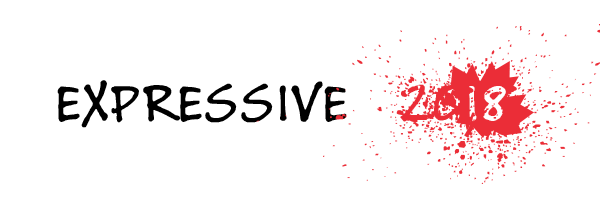
<style>
.page{position:relative;width:600px;height:200px;background:#ffffff}
.page>*{position:absolute;margin:0}
.t1{font:58.2px "BuxtonSketch";letter-spacing:0.05em;color:#000000}
.t2{font:58.2px "BuxtonSketch";letter-spacing:0.05em;color:#ffffff}
</style>
<div class="page">
<p class="t1" style="left:57px;top:80px;width:449px;height:48px">EXPRESSIVE   <span class="t2">2018</span></p>
</div>
